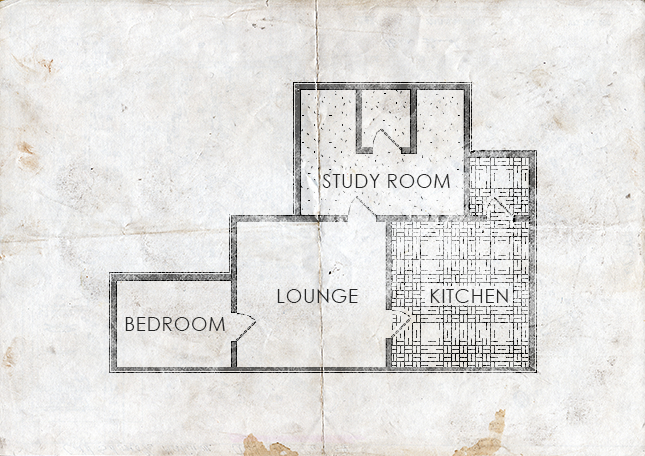
<style>
.page{position:relative;width:645px;height:456px}
.page>*{position:absolute;margin:0}
.t1{font:19.5px "CenturyGothic";letter-spacing:0.02em;color:#272727}
</style>
<div class="page">
<p class="t1" style="left:322px;top:174px;width:128px;height:14px">STUDY ROOM</p>
<p class="t1" style="left:277px;top:289px;width:81px;height:14px">LOUNGE</p>
<p class="t1" style="left:430px;top:289px;width:78px;height:14px">KITCHEN</p>
<p class="t1" style="left:125px;top:317px;width:100px;height:14px">BEDROOM</p>
</div>
